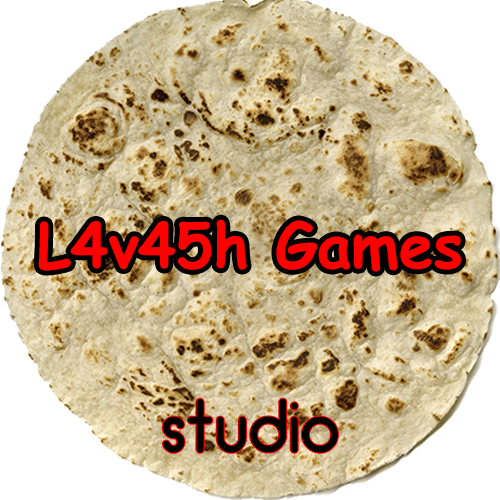
<style>
.page{position:relative;width:500px;height:500px;background:#ffffff}
.page>*{position:absolute;margin:0}
.t1{font:61.5px "ComicSansMS-Bold";color:#ff0000}
.t2{font:72px "ArciformSanscyr-lat-Regular";color:#000000}
</style>
<div class="page">
<p class="t1" style="left:38px;top:219px;width:423px;height:53px">L4v45h Games</p>
<p class="t2" style="left:162px;top:398px;width:176px;height:55px">studio</p>
</div>
